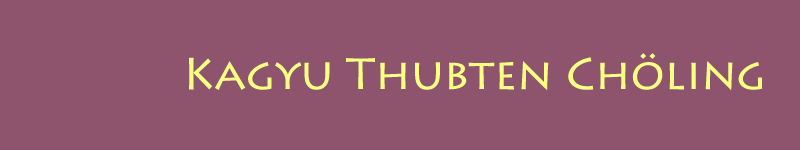
<style>
.page{position:relative;width:800px;height:150px;background:#8f546d}
.page>*{position:absolute;margin:0}
.t1{font:44px "LithosPro-Regular";color:#f8ff82}
</style>
<div class="page">
<p class="t1" style="left:189px;top:53px;width:574px;height:37px">Kagyu Thubten Chöling</p>
</div>
